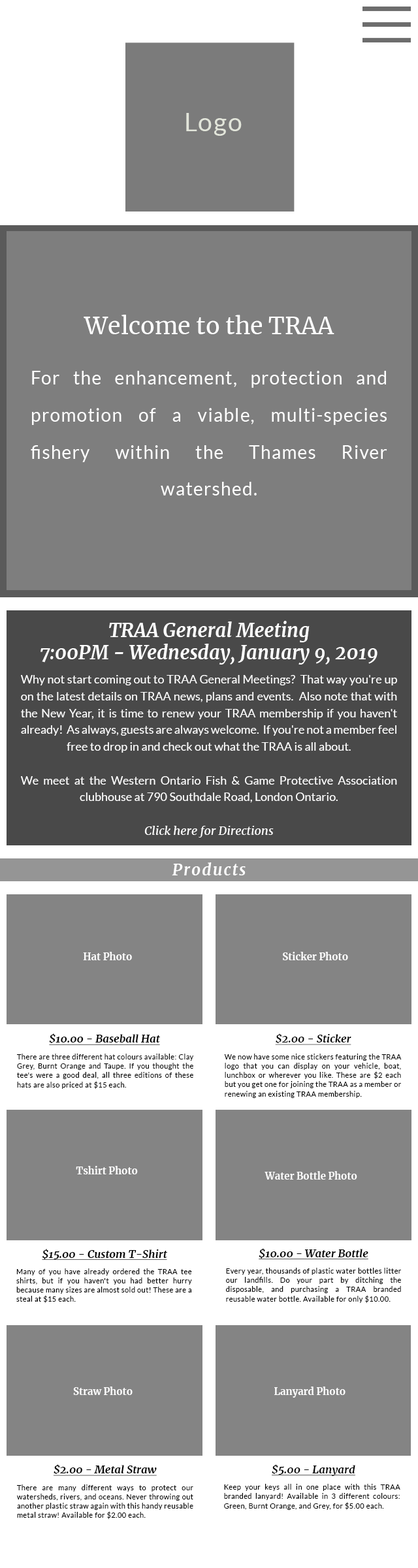
<style>
.page{position:relative;width:418px;height:1568px;background:#ffffff}
.page>*{position:absolute;margin:0}
.t1{font:25.3px "Lato-Regular";letter-spacing:0.05em;color:#e2e5da}
.t2{font:23.5px "Merriweather-Regular";color:#ffffff}
.t3{font:18.3px/37.1px "Lato-Regular";letter-spacing:0.05em;color:#ffffff}
.t4{font:18.9px "Merriweather-BoldItalic";color:#ffffff}
.t5{font:11.8px/16.8px "Lato-Regular";color:#ffffff}
.t6{font:11.8px/16.8px "Merriweather-Italic";color:#ffffff}
.t7{font:15.7px "Merriweather-BoldItalic";letter-spacing:0.085em;color:#ffffff}
.t8{font:9.7px "Merriweather-Bold";color:#fefefe}
.t9{font:10.4px "Merriweather-BoldItalic";color:#000000;text-decoration:underline;scale:1.03 1}
.t10{font:10.4px "Merriweather-BoldItalic";color:#000000;text-decoration:underline;scale:1.04 1}
.t11{font:7.2px/9.3px "Lato-Regular";letter-spacing:0.05em;color:#000000}
.t12{font:9.6px "Merriweather-Bold";color:#fefefe}
</style>
<div class="page">
<p class="t1" style="left:186px;top:113px;width:56px;height:23px">Logo</p>
<p class="t2" style="left:84px;top:315px;width:250px;height:19px">Welcome to the TRAA</p>
<p class="t3" style="left:31px;top:371px;width:356px;height:124px;text-align:justify">For the enhancement, protection and promotion of a viable, multi-species fishery within the Thames River watershed.</p>
<p class="t4" style="left:40px;top:621px;width:337px;height:44px;text-align:center">TRAA General Meeting<br>7:00PM - Wednesday, January 9, 2019</p>
<p class="t5" style="left:21px;top:675px;width:376px;height:163px;text-align:justify">Why not start coming out to TRAA General Meetings?  That way you're up on the latest details on TRAA news, plans and events.  Also note that with the New Year, it is time to renew your TRAA membership if you haven't already!  As always, guests are always welcome.  If you're not a member feel free to drop in and check out what the TRAA is all about.<br><br>We meet at the Western Ontario Fish &amp; Game Protective Association clubhouse at 790 Southdale Road, London Ontario. <span class="t6"> <br><br>Click here for Directions</span></p>
<p class="t7" style="left:172px;top:862px;width:73px;height:13px">Products</p>
<p class="t8" style="left:83px;top:952px;width:49px;height:8px">Hat Photo</p>
<p class="t8" style="left:283px;top:952px;width:65px;height:8px">Sticker Photo</p>
<p class="t9" style="left:49px;top:1033px;width:111px;height:12px">$10.00 - Baseball Hat</p>
<p class="t10" style="left:275px;top:1033px;width:76px;height:12px">$2.00 - Sticker</p>
<p class="t11" style="left:17px;top:1054px;width:177px;height:35px;text-align:justify">There are three different hat colours available: Clay Grey, Burnt Orange and Taupe. If you thought the tee's were a good deal, all three editions of these hats are also priced at $15 each.</p>
<p class="t11" style="left:224px;top:1054px;width:177px;height:44px;text-align:justify">We now have some nice stickers featuring the TRAA logo that you can display on your vehicle, boat, lunchbox or wherever you like. These are $2 each but you get one for joining the TRAA as a member or renewing an existing TRAA membership.</p>
<p class="t8" style="left:76px;top:1166px;width:62px;height:8px">Tshirt Photo</p>
<p class="t12" style="left:264px;top:1171px;width:93px;height:9px">Water Bottle Photo</p>
<p class="t9" style="left:42px;top:1249px;width:125px;height:11px">$15.00 - Custom T-Shirt</p>
<p class="t10" style="left:259px;top:1248px;width:109px;height:12px">$10.00 - Water Bottle</p>
<p class="t11" style="left:16px;top:1268px;width:176px;height:35px;text-align:justify">Many of you have already ordered the TRAA tee shirts, but if you haven't you had better hurry because many sizes are almost sold out! These are a steal at $15 each.</p>
<p class="t11" style="left:226px;top:1268px;width:175px;height:35px;text-align:justify">Every year, thousands of plastic water bottles litter our landfills. Do your part by ditching the disposable, and purchasing a TRAA branded reusable water bottle. Available for only $10.00.</p>
<p class="t8" style="left:73px;top:1387px;width:60px;height:8px">Straw Photo</p>
<p class="t8" style="left:274px;top:1387px;width:71px;height:11px">Lanyard Photo</p>
<p class="t9" style="left:53px;top:1464px;width:104px;height:12px">$2.00 - Metal Straw</p>
<p class="t10" style="left:272px;top:1464px;width:83px;height:12px">$5.00 - Lanyard</p>
<p class="t11" style="left:17px;top:1484px;width:176px;height:35px;text-align:justify">There are many different ways to protect our watersheds, rivers, and oceans. Never throwing out another plastic straw again with this handy reusable metal straw! Available for $2.00 each.</p>
<p class="t11" style="left:224px;top:1484px;width:176px;height:26px;text-align:justify">Keep your keys all in one place with this TRAA branded lanyard! Available in 3 different colours: Green, Burnt Orange, and Grey, for $5.00 each.</p>
</div>
